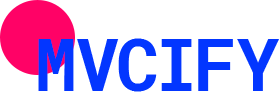
<style>
.page{position:relative;width:279px;height:92px;background:#ffffff}
.page>*{position:absolute;margin:0}
.t1{font:72px "RobotoMono-Bold";color:#0336ff}
</style>
<div class="page">
<p class="t1" style="left:38px;top:38px;width:241px;height:54px">MVCIFY</p>
</div>
